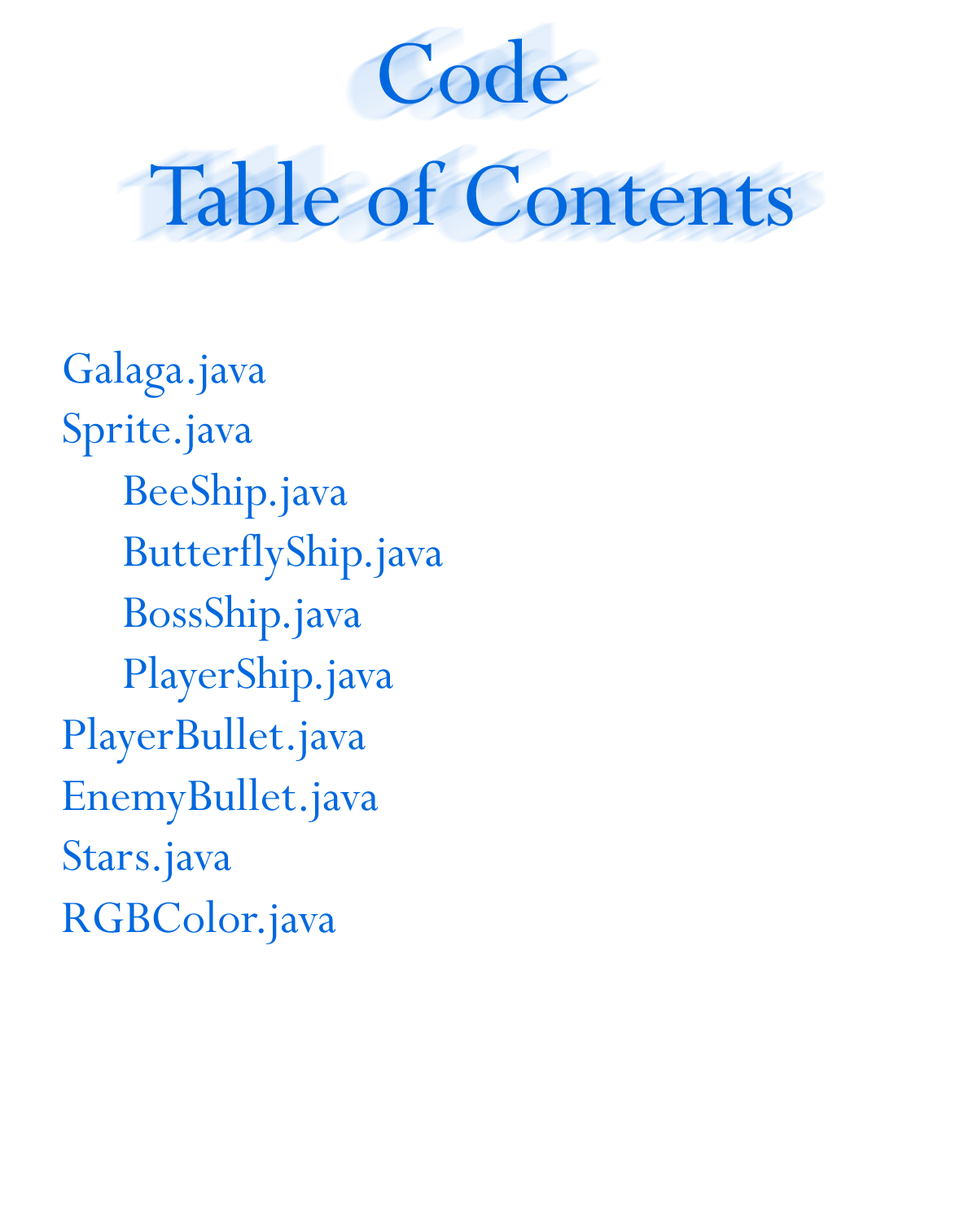
<style>
.page{position:relative;width:977px;height:1221px;background:#ffffff}
.page>*{position:absolute;margin:0}
.t1{font:101.7px "Perpetua";color:#0068de}
.t2{font:50.9px "Perpetua";color:#0068de}
</style>
<div class="page">
<p class="t1" style="left:151px;top:38px;width:642px;height:188px;text-align:center">Code <br>Table of Contents</p>
<p class="t2" style="left:63px;top:350px;width:203px;height:48px">Galaga.java</p>
<p class="t2" style="left:63px;top:413px;width:189px;height:44px">Sprite.java</p>
<p class="t2" style="left:124px;top:472px;width:224px;height:47px">BeeShip.java</p>
<p class="t2" style="left:124px;top:533px;width:319px;height:48px">ButterflyShip.java</p>
<p class="t2" style="left:124px;top:594px;width:237px;height:47px">BossShip.java</p>
<p class="t2" style="left:124px;top:655px;width:269px;height:48px">PlayerShip.java</p>
<p class="t2" style="left:63px;top:716px;width:302px;height:48px">PlayerBullet.java</p>
<p class="t2" style="left:63px;top:777px;width:315px;height:48px">EnemyBullet.java</p>
<p class="t2" style="left:63px;top:840px;width:168px;height:42px">Stars.java</p>
<p class="t2" style="left:63px;top:899px;width:273px;height:45px">RGBColor.java</p>
</div>
